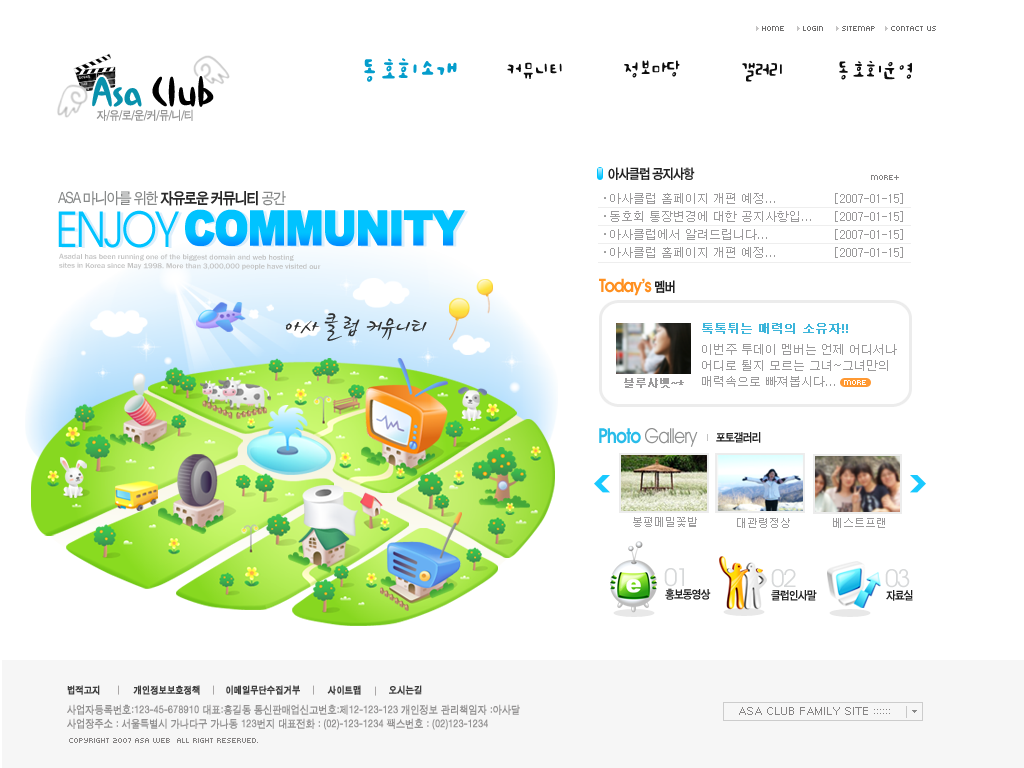
<style>
.page{position:relative;width:1024px;height:768px;background:#ffffff}
.page>*{position:absolute;margin:0}
.t1{font:8px "Kroeger0555";color:#706f6f}
.t2{font:30px "SanKfB";letter-spacing:-0.05em;color:#059dcc}
.t3{font:24px "SanKfM";letter-spacing:-0.05em;color:#0d0d0d;scale:0.9 1}
.t4{font:24px "SanKfM";letter-spacing:-0.05em;color:#0d0d0d}
.t5{font:48px "SanMcB";letter-spacing:-0.1em;color:#000000;font-weight:bold;scale:1.06 1}
.t6{font:48px "SanMcB";letter-spacing:-0.1em;color:#0991ac;font-weight:bold;scale:1.06 1}
.t7{font:12.2px "SandTg";letter-spacing:-0.025em;color:#979797;scale:0.88 1}
.t8{font:14px "SandKg";letter-spacing:-0.075em;color:#222222;scale:0.9 1}
.t9{font:8px "Kroeger0555";color:#868484}
.t10{font:16px "SandTg";letter-spacing:-0.075em;color:#878989;scale:0.9 1}
.t11{font:16px "SandKg";letter-spacing:-0.075em;color:#282828;scale:0.9 1}
.t12{font:12px/18px "Dotum";color:#9b9a9b}
.t13{font:48px "Arial-Black";letter-spacing:-0.05em;color:#00c3ff;font-weight:bold;scale:0.85 1}
.t14{font:48px "Arial-Black";letter-spacing:-0.05em;color:#0eaedf;font-weight:bold;scale:0.85 1}
.t15{font:48px "AvantGarde-Book";letter-spacing:-0.05em;color:#00c3ff;scale:0.85 1}
.t16{font:18px "AvantGarde-Demi";letter-spacing:-0.075em;color:#ff9020;scale:0.9 1}
.t17{font:30px "SJ¼ÒÁÖ1";letter-spacing:-0.075em;color:#303131;scale:0.9 1}
.t18{font:30px "SJ¼ÒÁÖ1";letter-spacing:-0.075em;color:#0481a8;scale:0.9 1}
.t19{font:12px "Dotum";color:#3db5da;font-weight:bold}
.t20{font:12px/16px "Dotum";color:#9b9a9b}
.t21{font:11px "Dotum";color:#9b9a9b;font-weight:bold}
.t22{font:8px "Kroeger0555";color:#ffffff}
.t23{font:20px "AvantGarde-Book";letter-spacing:-0.05em;color:#8e8f8f;scale:0.85 1}
.t24{font:20px "AvantGarde-Demi";letter-spacing:-0.05em;color:#28bce9;scale:0.85 1}
.t25{font:12px "SandKg";letter-spacing:-0.075em;color:#222222;scale:0.9 1}
.t26{font:11px "Dotum";color:#9b9a9b}
.t27{font:24px "AvantGarde-Book";letter-spacing:-0.05em;color:#d6d8d9}
.t28{font:10px "SandKg";color:#3e3e3e;font-weight:bold;scale:0.9 1}
.t29{font:11px/14px "SandTg";color:#939292;font-weight:bold;scale:0.9 1}
.t30{font:11px "Gulim";color:#868484}
</style>
<div class="page">
<p class="t1" style="left:762px;top:26px;width:174px;height:5px">HOME      LOGIN      SITEMAP     CONTACT US</p>
<p class="t2" style="left:364px;top:58px;width:93px;height:24px">동호회소개</p>
<p class="t3" style="left:507px;top:62px;width:55px;height:17px">커뮤니티</p>
<p class="t3" style="left:624px;top:60px;width:56px;height:18px">정보마당</p>
<p class="t3" style="left:742px;top:62px;width:40px;height:20px">갤러리</p>
<p class="t4" style="left:839px;top:60px;width:73px;height:20px">동호회운영</p>
<p class="t5" style="left:92px;top:76px;width:122px;height:31px"><span class="t6">Asa </span>Club</p>
<p class="t7" style="left:96px;top:109px;width:97px;height:12px">자/유/로/운/커/뮤/니/티</p>
<p class="t8" style="left:608px;top:167px;width:87px;height:13px">아사클럽 공지사항</p>
<p class="t9" style="left:871px;top:175px;width:28px;height:5px">MORE+</p>
<p class="t10" style="left:58px;top:191px;width:228px;height:15px">ASA 마니아를 위한 <span class="t11">자유로운 커뮤니티</span> 공간</p>
<p class="t12" style="left:610px;top:193px;width:293px;height:65px">아사클럽 홈페이지 개편 예정...              [2007-01-15]<br>동호회 통장변경에 대한 공지사항입...     [2007-01-15]<br>아사클럽에서 알려드립니다...                [2007-01-15]<br>아사클럽 홈페이지 개편 예정...              [2007-01-15]</p>
<p class="t13" style="left:185px;top:209px;width:280px;height:37px"><span class="t14"> </span>COMMUNITY</p>
<p class="t15" style="left:58px;top:210px;width:121px;height:38px">ENJOY</p>
<p class="t16" style="left:599px;top:278px;width:53px;height:18px">Today’s</p>
<p class="t8" style="left:655px;top:280px;width:20px;height:13px">멤버</p>
<p class="t17" style="left:285px;top:313px;width:142px;height:28px"><span class="t18"> </span>아사 클럽 커뮤니티</p>
<p class="t19" style="left:702px;top:323px;width:146px;height:11px">톡톡튀는 매력의 소유자!!</p>
<p class="t20" style="left:702px;top:344px;width:195px;height:43px">이번주 투데이 멤버는 언제 어디서나 <br>어디로 튈지 모르는 그녀~그녀만의 <br>매력속으로 빠져봅시다...</p>
<p class="t21" style="left:624px;top:378px;width:60px;height:10px">블루샤벳~*</p>
<p class="t22" style="left:844px;top:380px;width:22px;height:5px">MORE</p>
<p class="t23" style="left:599px;top:428px;width:99px;height:19px"><span class="t24">Photo</span> Gallery</p>
<p class="t25" style="left:716px;top:432px;width:45px;height:11px">포토갤러리</p>
<p class="t26" style="left:633px;top:517px;width:64px;height:10px">봉평메밀꽃밭</p>
<p class="t26" style="left:737px;top:518px;width:53px;height:10px">대관령정상</p>
<p class="t26" style="left:833px;top:518px;width:52px;height:10px">베스트프랜</p>
<p class="t27" style="left:664px;top:568px;width:20px;height:19px">01</p>
<p class="t27" style="left:771px;top:569px;width:25px;height:19px">02</p>
<p class="t27" style="left:885px;top:569px;width:25px;height:19px">03</p>
<p class="t25" style="left:665px;top:588px;width:46px;height:12px">홍보동영상</p>
<p class="t25" style="left:771px;top:590px;width:46px;height:11px">클럽인사말</p>
<p class="t25" style="left:886px;top:590px;width:27px;height:11px">자료실</p>
<p class="t28" style="left:67px;top:685px;width:355px;height:10px">법적고지            개인정보보호정책         이메일무단수집거부          사이트맵          오시는길</p>
<p class="t29" style="left:67px;top:704px;width:453px;height:26px">사업자등록번호:123-45-678910 대표:홍길동 통신판매업신고번호:제12-123-123 개인정보 관리책임자 :아사달<br>사업장주소 : 서울특별시 가나다구 가나동 123번지 대표전화 : (02)-123-1234 팩스번호 : (02)123-1234</p>
<p class="t30" style="left:739px;top:707px;width:151px;height:8px">ASA CLUB FAMILY SITE ::::::</p>
<p class="t9" style="left:69px;top:738px;width:189px;height:5px">COPYRIGHT 2007 ASA WEB  ALL RIGHT RESERVED.</p>
</div>
